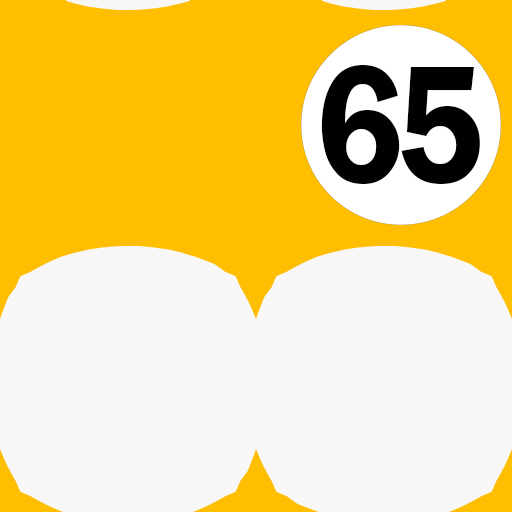
<style>
.page{position:relative;width:512px;height:512px;background:#f7f7f7}
.page>*{position:absolute;margin:0}
.t1{font:172.5px "FranklinGothic-Demi";letter-spacing:-0.05em;color:#010101;scale:0.87 1}
</style>
<div class="page">
<p class="t1" style="left:321px;top:65px;width:159px;height:119px">65</p>
</div>
